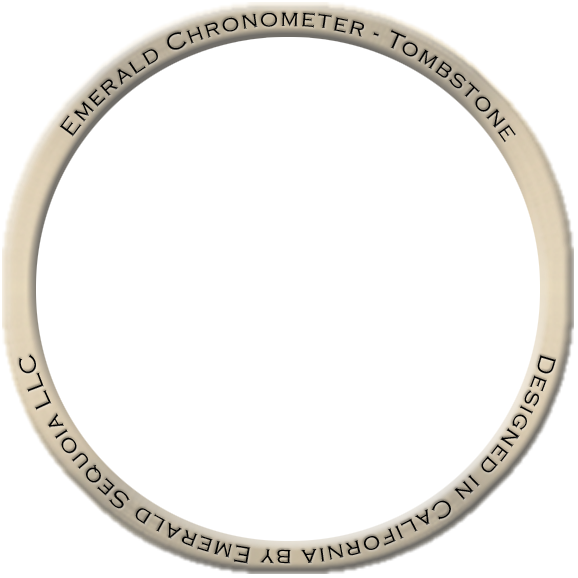
<style>
.page{position:relative;width:578px;height:578px;background:#ffffff}
.page>*{position:absolute;margin:0}
.t1{font:24px "CopperplateGothic-Light";letter-spacing:0.075em;color:#000000}
</style>
<div class="page">
<p class="t1" style="left:19px;top:12px;width:537px;height:552px">Emerald Chronometer - Tombstone                            Designed in California by Emerald Sequoia LLC</p>
</div>
